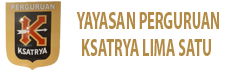
<style>
.page{position:relative;width:228px;height:70px;background:#ffffff}
.page>*{position:absolute;margin:0}
.t1{font:24px "MyriadPro-Bold";color:#b38b46;scale:0.6 1}
</style>
<div class="page">
<p class="t1" style="left:76px;top:12px;width:143px;height:17px">YAYASAN PERGURUAN</p>
<p class="t1" style="left:82px;top:39px;width:129px;height:17px">KSATRYA LIMA SATU</p>
</div>
